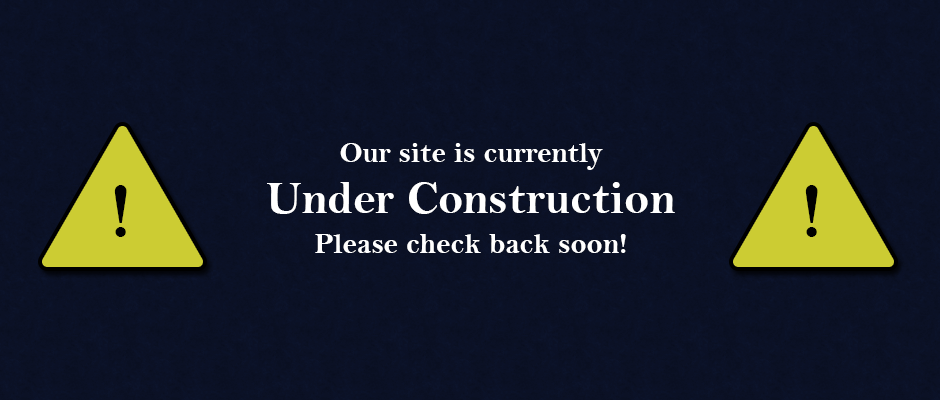
<style>
.page{position:relative;width:940px;height:400px;background:#0b1125}
.page>*{position:absolute;margin:0}
.t1{font:30.1px "BellMTBold";color:#ffffff}
.t2{font:76.5px "BellMTBold";color:#000000}
.t3{font:46.6px "BellMTBold";color:#ffffff}
</style>
<div class="page">
<p class="t1" style="left:340px;top:143px;width:263px;height:27px">Our site is currently</p>
<p class="t2" style="left:114px;top:185px;width:13px;height:52px">!</p>
<p class="t3" style="left:267px;top:182px;width:408px;height:32px">Under Construction</p>
<p class="t2" style="left:805px;top:185px;width:13px;height:52px">!</p>
<p class="t1" style="left:315px;top:234px;width:311px;height:19px">Please check back soon!</p>
</div>
